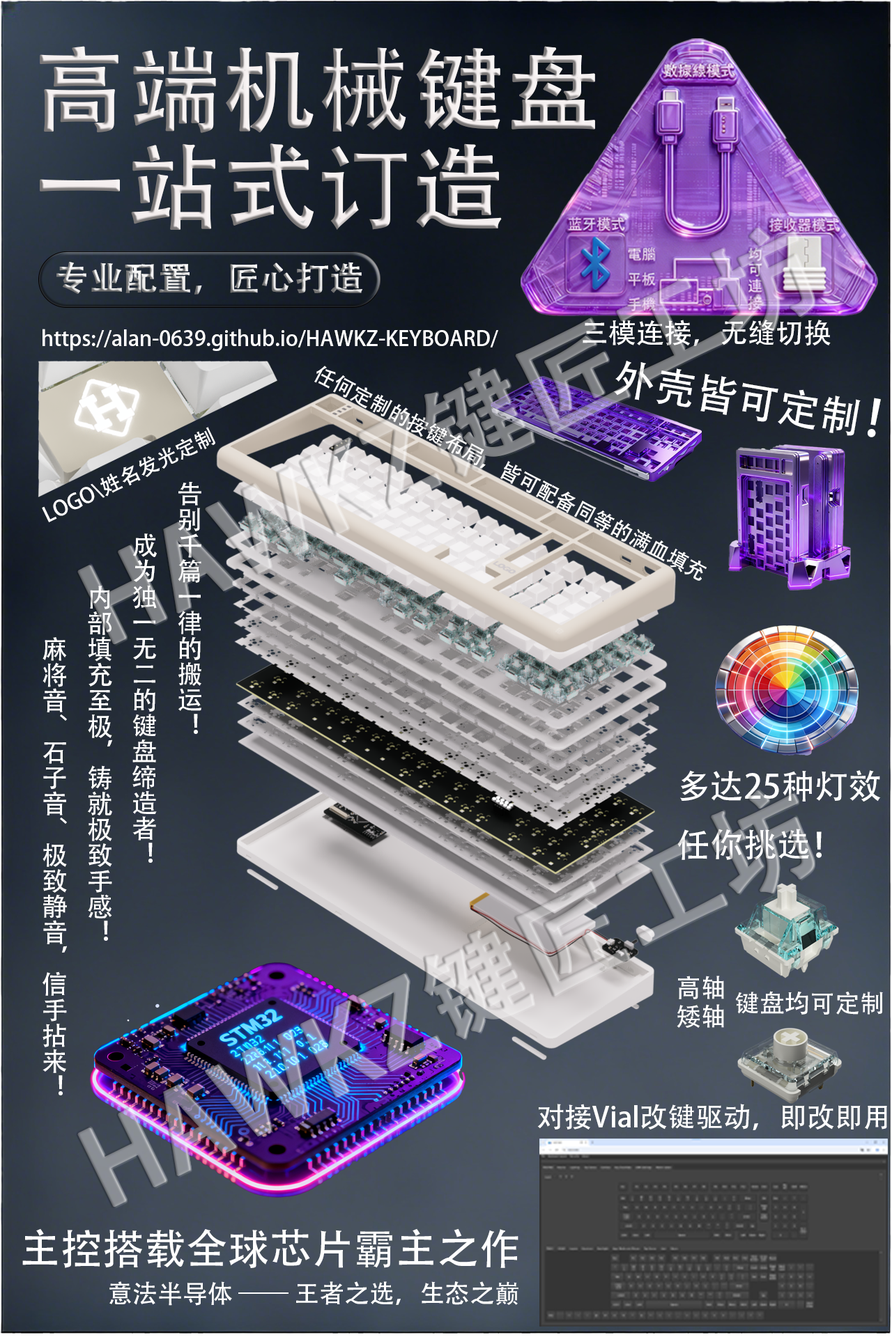
<style>
.page{position:relative;width:892px;height:1337px}
.page>*{position:absolute;margin:0}
.t1{font:20.9px "AdobeHeitiStd-Regular";color:#ffffff}
.t2{font:27.9px "AdobeHeitiStd-Regular";color:#ffffff}
.t3{font:41.8px "AdobeHeitiStd-Regular";color:#ffffff}
.t4{font:50.2px "AdobeHeitiStd-Regular";color:#ffffff}
.t5{font:25.8px "AdobeHeitiStd-Regular";color:#ffffff}
.t6{font:33.4px "AdobeHeitiStd-Regular";color:#ffffff}
.t7{font:25.1px "AdobeHeitiStd-Regular";color:#ffffff}
</style>
<div class="page">
<p class="t1" style="left:42px;top:329px;width:456px;height:22px">https://alan-0639.github.io/HAWKZ-KEYBOARD/</p>
<p class="t2" style="left:582px;top:320px;width:248px;height:26px">三模连接，无缝切换</p>
<p class="t3" style="left:613px;top:361px;width:267px;height:76px;rotate:10deg">外壳皆可定制<span class="t4">！</span></p>
<p class="t1" style="left:42px;top:427px;width:173px;height:95px;rotate:-26deg">LOGO\姓名发光定制</p>
<p class="t5" style="left:42px;top:482px;width:159px;height:614px">告别千篇一律的搬运！<br>         成为独一无二的键盘缔造者！<br>                  内部填充至极，铸就极致手感！<br>                           麻将音、石子音、极致静音，信手拈来！</p>
<p class="t6" style="left:677px;top:770px;width:203px;height:90px">多达25种灯效<br>任你挑选！</p>
<p class="t7" style="left:678px;top:976px;width:46px;height:24px">高轴</p>
<p class="t7" style="left:735px;top:991px;width:148px;height:24px">键盘均可定制</p>
<p class="t7" style="left:676px;top:1004px;width:48px;height:24px">矮轴</p>
<p class="t2" style="left:537px;top:1104px;width:350px;height:27px">对接Vial改键驱动，即改即用</p>
<p class="t3" style="left:22px;top:1229px;width:496px;height:39px">主控搭载全球芯片霸主之作</p>
<p class="t7" style="left:109px;top:1282px;width:409px;height:24px">意法半导体 —— 王者之选，生态之巅</p>
</div>
